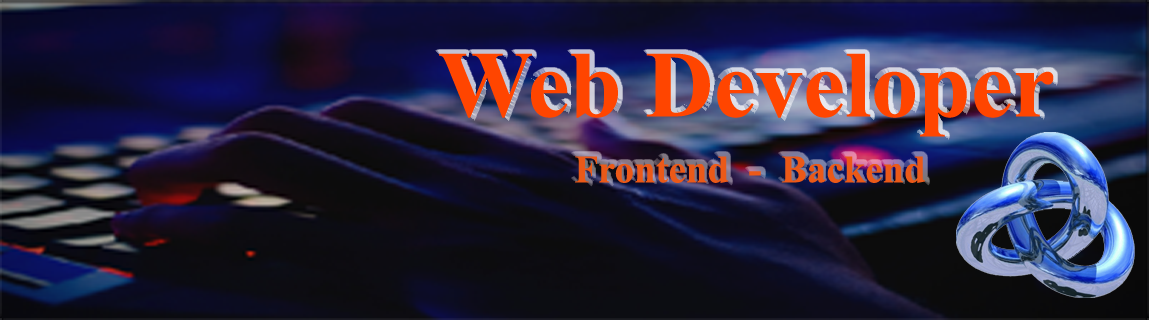
<style>
.page{position:relative;width:1149px;height:320px}
.page>*{position:absolute;margin:0}
.t1{font:94.4px "TimesNewRomanPS-BoldMT";color:#ff4500}
.t2{font:38.9px "TimesNewRomanPS-BoldMT";color:#eb5918}
</style>
<div class="page">
<p class="t1" style="left:439px;top:53px;width:615px;height:84px">Web Developer</p>
<p class="t2" style="left:575px;top:156px;width:350px;height:27px">Frontend  -  Backend</p>
</div>
